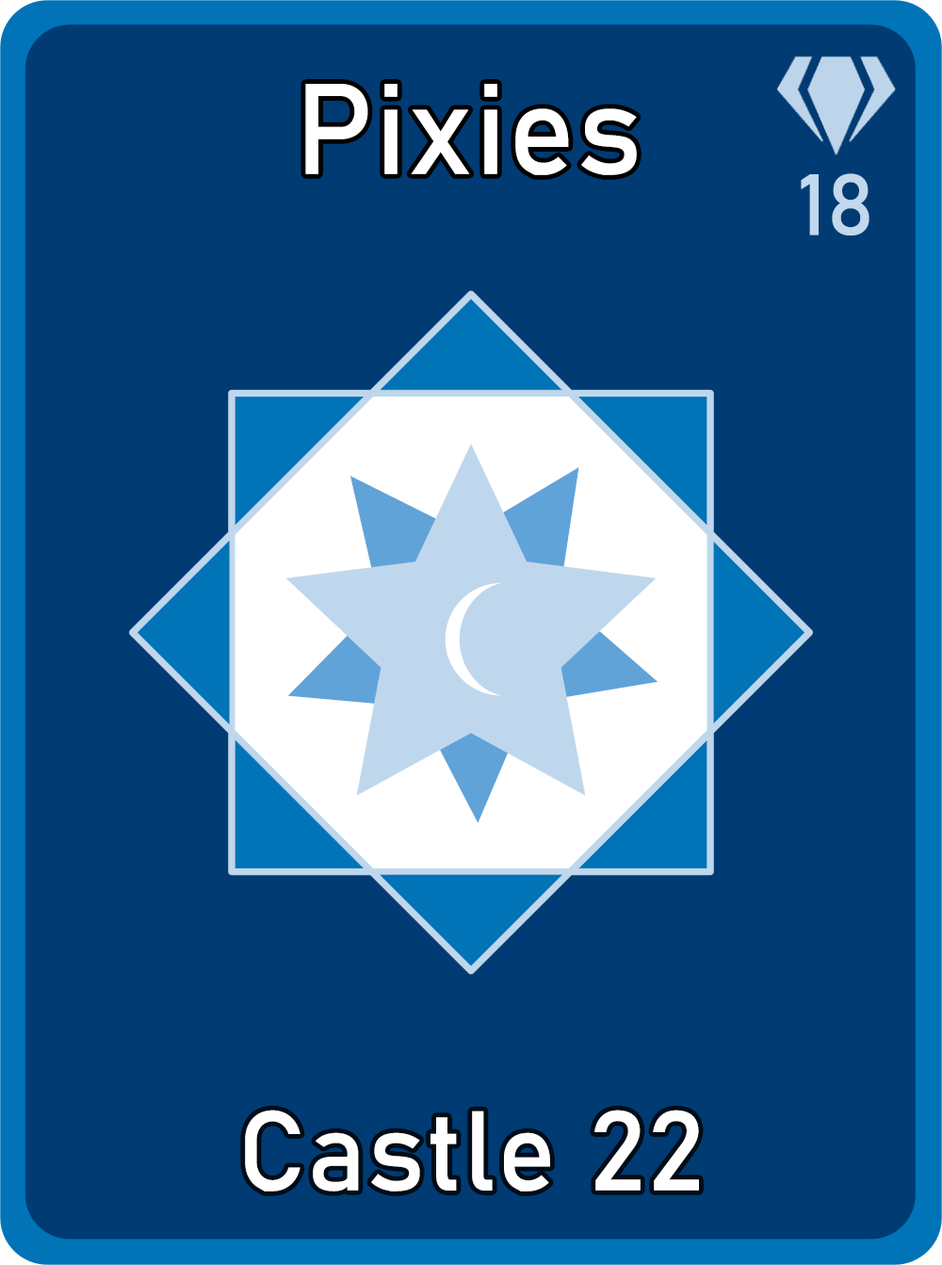
<style>
.page{position:relative;width:942px;height:1265px;background:#003b73}
.page>*{position:absolute;margin:0}
.t1{font:126.7px "Bahnschrift";letter-spacing:0.01em;color:#ffffff}
.t2{font:85px "Bahnschrift";letter-spacing:0.01em;color:#c1d8ed}
.t3{font:111.3px "Bahnschrift";letter-spacing:0.01em;color:#ffffff}
</style>
<div class="page">
<p class="t1" style="left:305px;top:84px;width:332px;height:91px">Pixies</p>
<p class="t2" style="left:801px;top:173px;width:69px;height:63px">18</p>
<p class="t3" style="left:245px;top:1110px;width:454px;height:82px">Castle 22</p>
</div>
